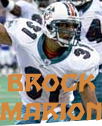
<style>
.page{position:relative;width:102px;height:126px}
.page>*{position:absolute;margin:0}
.t1{font:24px "RomulanEagle";color:#d3873c}
</style>
<div class="page">
<p class="t1" style="left:0px;top:73px;width:102px;height:48px;text-align:center">BROCK<br>MARION</p>
</div>
